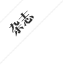
<style>
.page{position:relative;width:69px;height:68px;background:#ffffff}
.page>*{position:absolute;margin:0}
.t1{font:14px "MFShangYa_Noncommercial-Regular";color:#333333}
</style>
<div class="page">
<p class="t1" style="left:9px;top:10px;width:25px;height:27px;rotate:-45deg">杂志</p>
</div>
